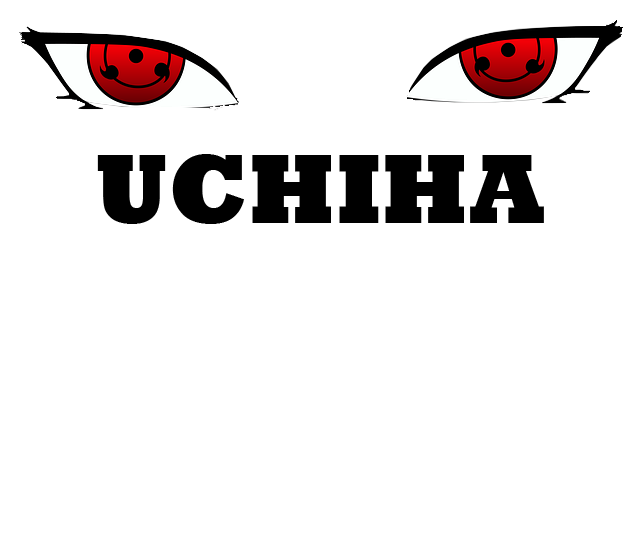
<style>
.page{position:relative;width:640px;height:557px;background:#ffffff}
.page>*{position:absolute;margin:0}
.t1{font:100px "Rockwell-ExtraBold";color:#000000}
</style>
<div class="page">
<p class="t1" style="left:97px;top:154px;width:447px;height:70px">UCHIHA</p>
</div>
